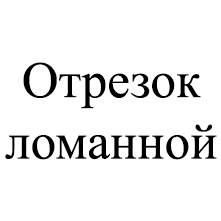
<style>
.page{position:relative;width:221px;height:221px;background:#ffffff}
.page>*{position:absolute;margin:0}
.t1{font:51.1px "TimesNewRomanPSMT";color:#000000}
</style>
<div class="page">
<p class="t1" style="left:5px;top:62px;width:212px;height:98px;text-align:center">Отрезок<br>ломанной</p>
</div>
